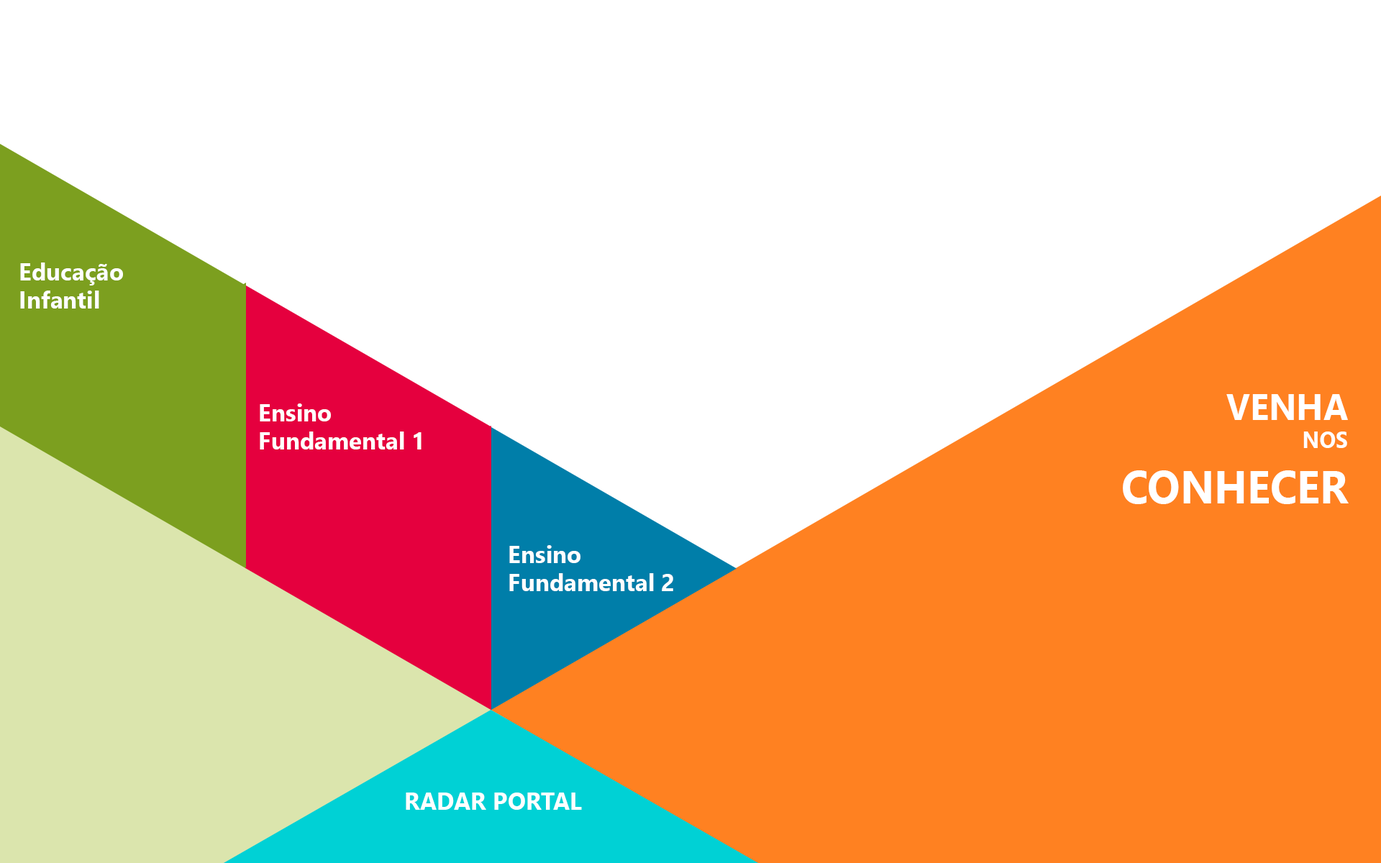
<style>
.page{position:relative;width:1381px;height:863px;background:#ffffff}
.page>*{position:absolute;margin:0}
.t1{font:23.8px "SegoeUI-Bold";color:#ffffff}
.t2{font:46.1px "SegoeUI-Bold";color:#ffffff;scale:0.93 1}
.t3{font:37.5px "SegoeUI-Bold";color:#ffffff;scale:0.93 1}
.t4{font:23.1px "SegoeUI-Bold";color:#ffffff;scale:0.93 1}
</style>
<div class="page">
<p class="t1" style="left:20px;top:263px;width:103px;height:46px">Educação <br>Infantil</p>
<p class="t2" style="left:1123px;top:394px;width:226px;height:110px;text-align:right"><span class="t3">VENHA<br></span><span class="t4">NOS<br></span>CONHECER</p>
<p class="t1" style="left:260px;top:404px;width:162px;height:46px">Ensino<br>Fundamental 1</p>
<p class="t1" style="left:509px;top:545px;width:164px;height:46px">Ensino<br>Fundamental 2</p>
<p class="t1" style="left:406px;top:793px;width:176px;height:17px">RADAR PORTAL</p>
</div>
